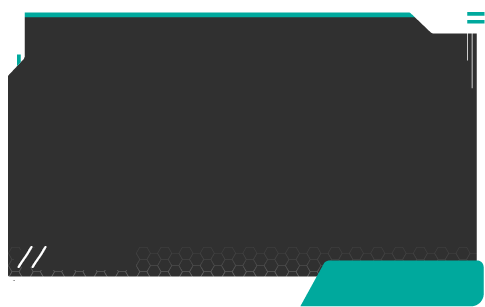
<style>
.page{position:relative;width:485px;height:307px;background:#303030}
.page>*{position:absolute;margin:0}
.t1{font:27px "ComicSansMS-Italic";color:#ffffff}
</style>
<div class="page">
<p class="t1" style="left:17px;top:246px;width:30px;height:22px">//</p>
</div>
